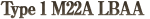
<style>
.page{position:relative;width:150px;height:19px;background:#ffffff}
.page>*{position:absolute;margin:0}
.t1{font:18px "RyuminPro-ExBold";letter-spacing:-0.08em;color:#4a3f32;font-weight:bold;scale:0.9 1}
</style>
<div class="page">
<p class="t1" style="left:0px;top:1px;width:145px;height:18px">Type 1 M22A LBAA</p>
</div>
